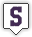
<style>
.page{position:relative;width:32px;height:37px;background:#ffffff}
.page>*{position:absolute;margin:0}
.t1{font:25px "HighSchoolUSASerif";color:#432b54}
</style>
<div class="page">
<p class="t1" style="left:10px;top:6px;width:12px;height:21px">S</p>
</div>
